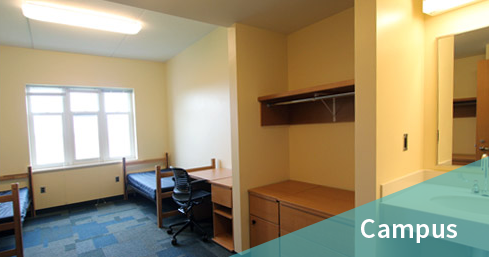
<style>
.page{position:relative;width:489px;height:257px}
.page>*{position:absolute;margin:0}
.t1{font:28px "SourceSansPro-Semibold";color:#fefefe}
</style>
<div class="page">
<p class="t1" style="left:361px;top:219px;width:96px;height:24px">Campus</p>
</div>
